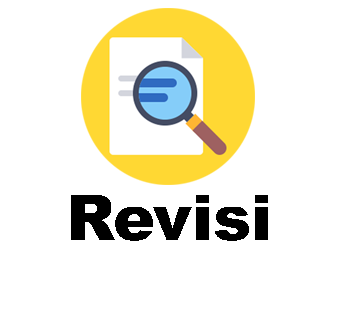
<style>
.page{position:relative;width:344px;height:320px;background:#ffffff}
.page>*{position:absolute;margin:0}
.t1{font:63px "Arial-Black";color:#000000}
</style>
<div class="page">
<p class="t1" style="left:71px;top:195px;width:197px;height:46px">Revisi</p>
</div>
